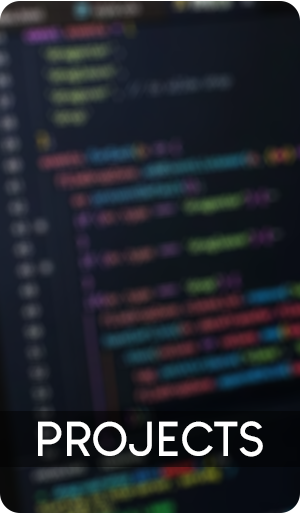
<style>
.page{position:relative;width:300px;height:514px}
.page>*{position:absolute;margin:0}
.t1{font:48px "LouisGeorgeCafe-Bold";color:#ffffff}
</style>
<div class="page">
<p class="t1" style="left:38px;top:421px;width:225px;height:36px">PROJECTS</p>
</div>
